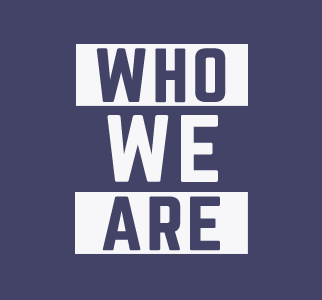
<style>
.page{position:relative;width:322px;height:300px;background:#434367}
.page>*{position:absolute;margin:0}
.t1{font:66.2px "Norwester-Regular";letter-spacing:0.02em;color:#434367;text-transform:uppercase;font-weight:bold;scale:1.1 1}
.t2{font:82.7px "Norwester-Regular";letter-spacing:0.02em;color:#f7f7f9;text-transform:uppercase;font-weight:bold;scale:1.1 1}
</style>
<div class="page">
<p class="t1" style="left:96px;top:48px;width:130px;height:55px">who</p>
<p class="t2" style="left:107px;top:115px;width:111px;height:67px">we</p>
<p class="t1" style="left:102px;top:196px;width:118px;height:55px">are</p>
</div>
